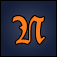
<style>
.page{position:relative;width:57px;height:57px}
.page>*{position:absolute;margin:0}
.t1{font:36px "LucidaBlackletter";color:#ff7f20}
</style>
<div class="page">
<p class="t1" style="left:12px;top:16px;width:33px;height:28px">N</p>
</div>
